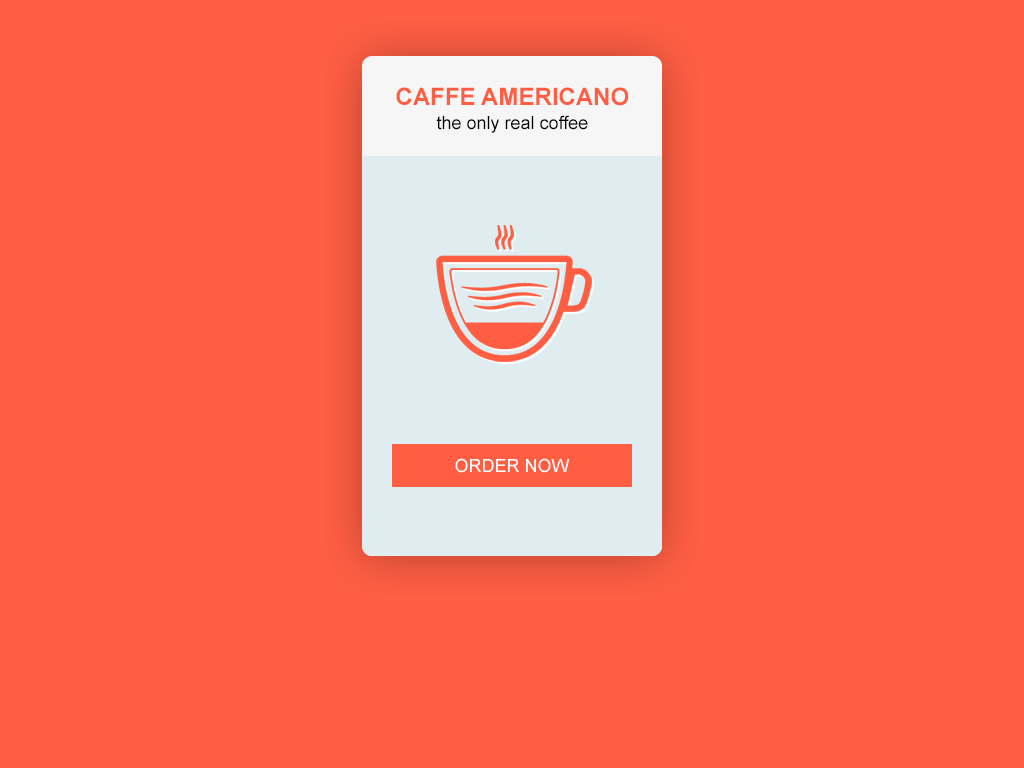
<style>
.page{position:relative;width:1024px;height:768px;background:#ff5e43}
.page>*{position:absolute;margin:0}
.t1{font:24px "Arial-BoldMT";color:#ff5e43;text-transform:uppercase}
.t2{font:18px "ArialMT";color:#010101}
.t3{font:18px "ArialMT";color:#ffffff;text-transform:uppercase}
</style>
<div class="page">
<p class="t1" style="left:396px;top:87px;width:233px;height:19px">CAFFE AMERICANO</p>
<p class="t2" style="left:436px;top:115px;width:152px;height:18px">the only real coffee</p>
<p class="t3" style="left:455px;top:458px;width:115px;height:15px">ORDER NOW</p>
</div>
